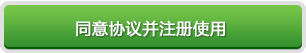
<style>
.page{position:relative;width:306px;height:53px}
.page>*{position:absolute;margin:0}
.t1{font:16px "MicrosoftYaHei";letter-spacing:0.025em;color:#ffffff;font-weight:bold}
</style>
<div class="page">
<p class="t1" style="left:76px;top:20px;width:149px;height:17px">同意协议并注册使用</p>
</div>
